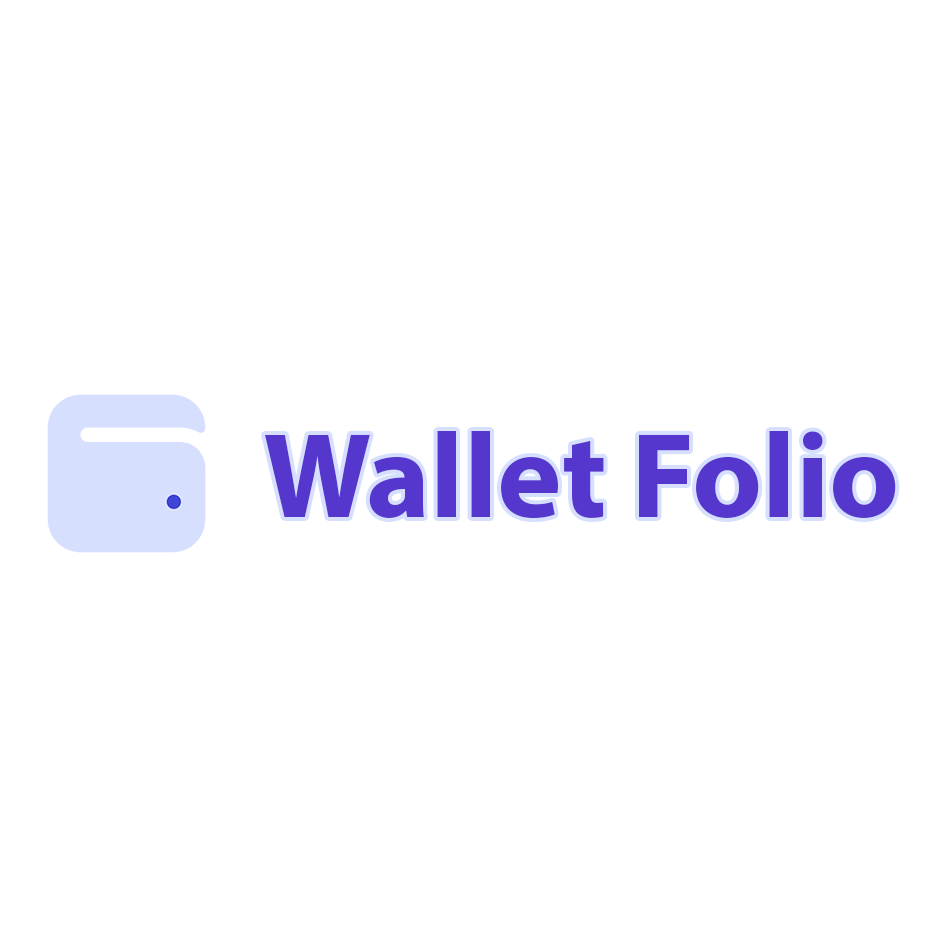
<style>
.page{position:relative;width:944px;height:944px;background:#ffffff}
.page>*{position:absolute;margin:0}
.t1{font:121.7px "MyriadPro-Bold";color:#5637cd}
</style>
<div class="page">
<p class="t1" style="left:265px;top:431px;width:631px;height:88px">Wallet Folio</p>
</div>
